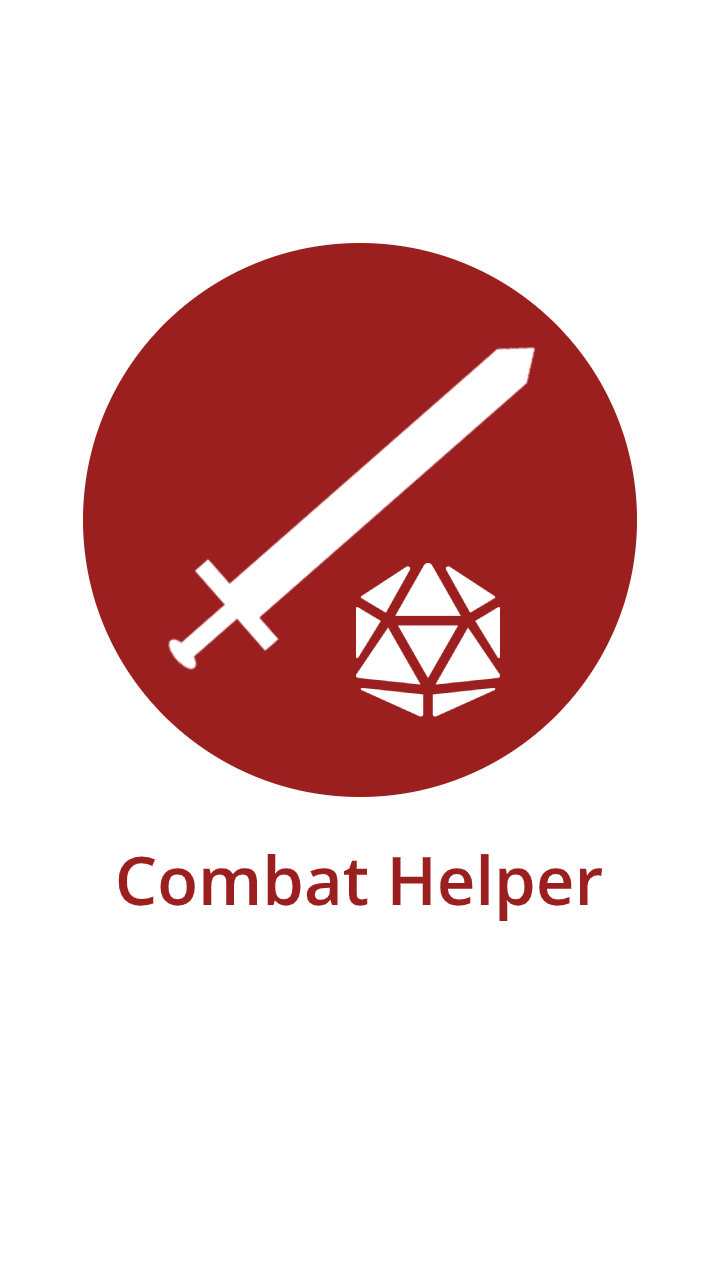
<style>
.page{position:relative;width:720px;height:1280px;background:#ffffff}
.page>*{position:absolute;margin:0}
.t1{font:67px "OpenSans-Semibold";color:#9c1f1f}
</style>
<div class="page">
<p class="t1" style="left:118px;top:854px;width:485px;height:68px">Combat Helper</p>
</div>
